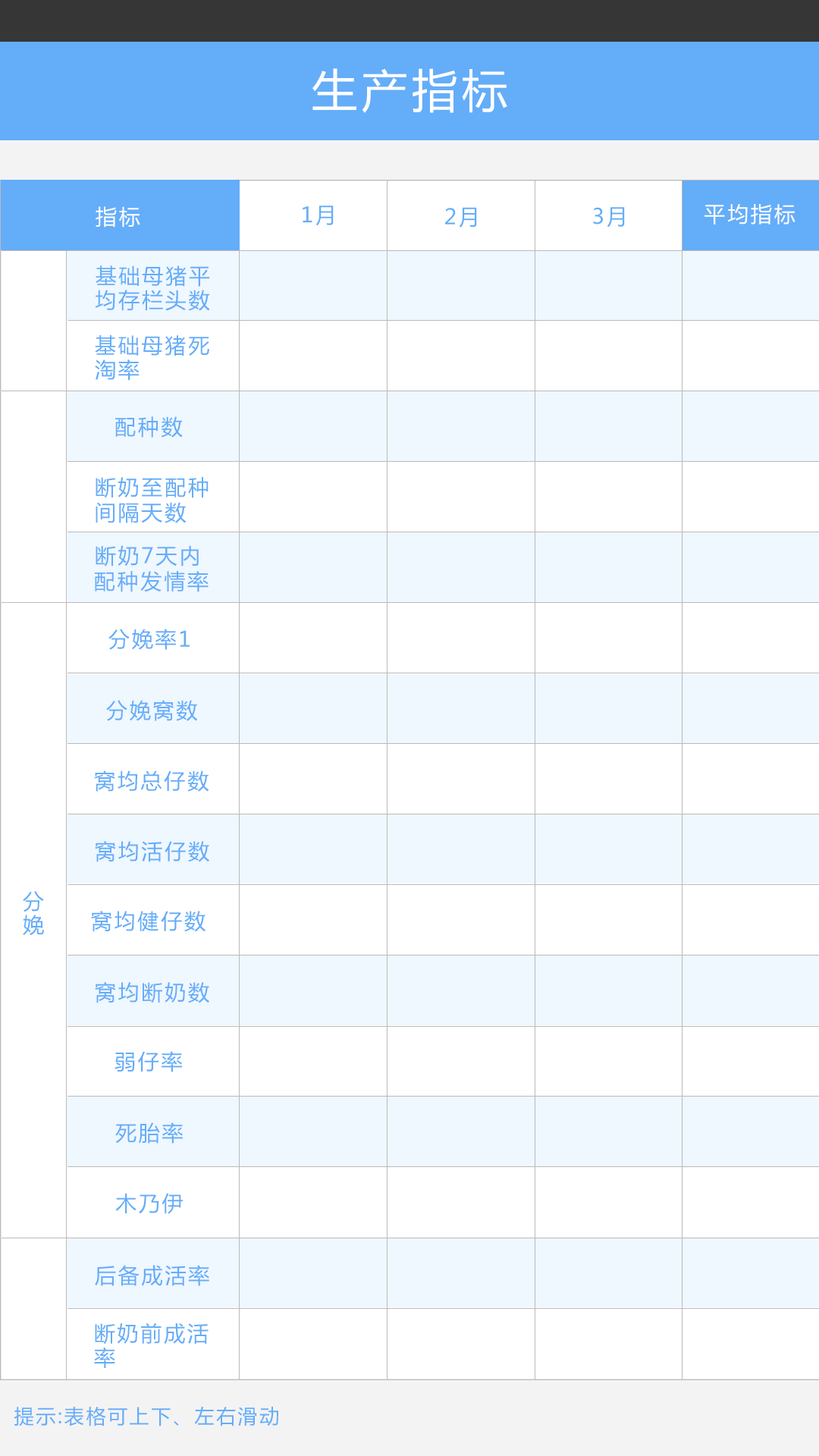
<style>
.page{position:relative;width:819px;height:1456px;background:#ffffff}
.page>*{position:absolute;margin:0}
.t1{font:45.5px "MicrosoftYaHei";letter-spacing:0.1em;color:#ffffff}
.t2{font:21.2px "MicrosoftYaHei";letter-spacing:0.1em;color:#ffffff}
.t3{font:21.2px "MicrosoftYaHei";letter-spacing:0.1em;color:#64adf9}
.t4{font:21.2px/15.2px "MicrosoftYaHei";letter-spacing:0.1em;color:#64adf9}
.t5{font:19.7px "MicrosoftYaHei";letter-spacing:0.1em;color:#64adf9}
</style>
<div class="page">
<p class="t1" style="left:312px;top:68px;width:195px;height:45px">生产指标</p>
<p class="t2" style="left:96px;top:206px;width:44px;height:21px">指标</p>
<p class="t3" style="left:303px;top:206px;width:31px;height:20px">1月</p>
<p class="t3" style="left:445px;top:207px;width:32px;height:20px">2月</p>
<p class="t3" style="left:593px;top:207px;width:32px;height:20px">3月</p>
<p class="t2" style="left:704px;top:204px;width:91px;height:20px">平均指标</p>
<p class="t3" style="left:96px;top:265px;width:114px;height:22px">基础母猪平</p>
<p class="t3" style="left:95px;top:290px;width:115px;height:21px">均存栏头数</p>
<p class="t3" style="left:95px;top:335px;width:114px;height:21px">基础母猪死</p>
<p class="t3" style="left:95px;top:359px;width:45px;height:22px">淘率</p>
<p class="t3" style="left:115px;top:416px;width:68px;height:22px">配种数</p>
<p class="t3" style="left:96px;top:477px;width:113px;height:21px">断奶至配种</p>
<p class="t3" style="left:96px;top:502px;width:91px;height:21px">间隔天数</p>
<p class="t3" style="left:96px;top:545px;width:103px;height:21px">断奶7天内</p>
<p class="t3" style="left:94px;top:571px;width:115px;height:21px">配种发情率</p>
<p class="t3" style="left:108px;top:629px;width:82px;height:21px">分娩率1</p>
<p class="t3" style="left:106px;top:700px;width:92px;height:21px">分娩窝数</p>
<p class="t3" style="left:94px;top:770px;width:115px;height:22px">窝均总仔数</p>
<p class="t3" style="left:95px;top:841px;width:114px;height:21px">窝均活仔数</p>
<p class="t4" style="left:23px;top:891px;width:21px;height:45px">分娩</p>
<p class="t3" style="left:91px;top:911px;width:115px;height:21px">窝均健仔数</p>
<p class="t3" style="left:95px;top:982px;width:114px;height:21px">窝均断奶数</p>
<p class="t3" style="left:115px;top:1051px;width:67px;height:21px">弱仔率</p>
<p class="t3" style="left:115px;top:1122px;width:68px;height:22px">死胎率</p>
<p class="t3" style="left:115px;top:1193px;width:68px;height:21px">木乃伊</p>
<p class="t3" style="left:95px;top:1265px;width:114px;height:21px">后备成活率</p>
<p class="t3" style="left:95px;top:1323px;width:114px;height:22px">断奶前成活</p>
<p class="t3" style="left:94px;top:1347px;width:21px;height:21px">率</p>
<p class="t5" style="left:14px;top:1407px;width:264px;height:19px">提示:表格可上下、左右滑动</p>
</div>
